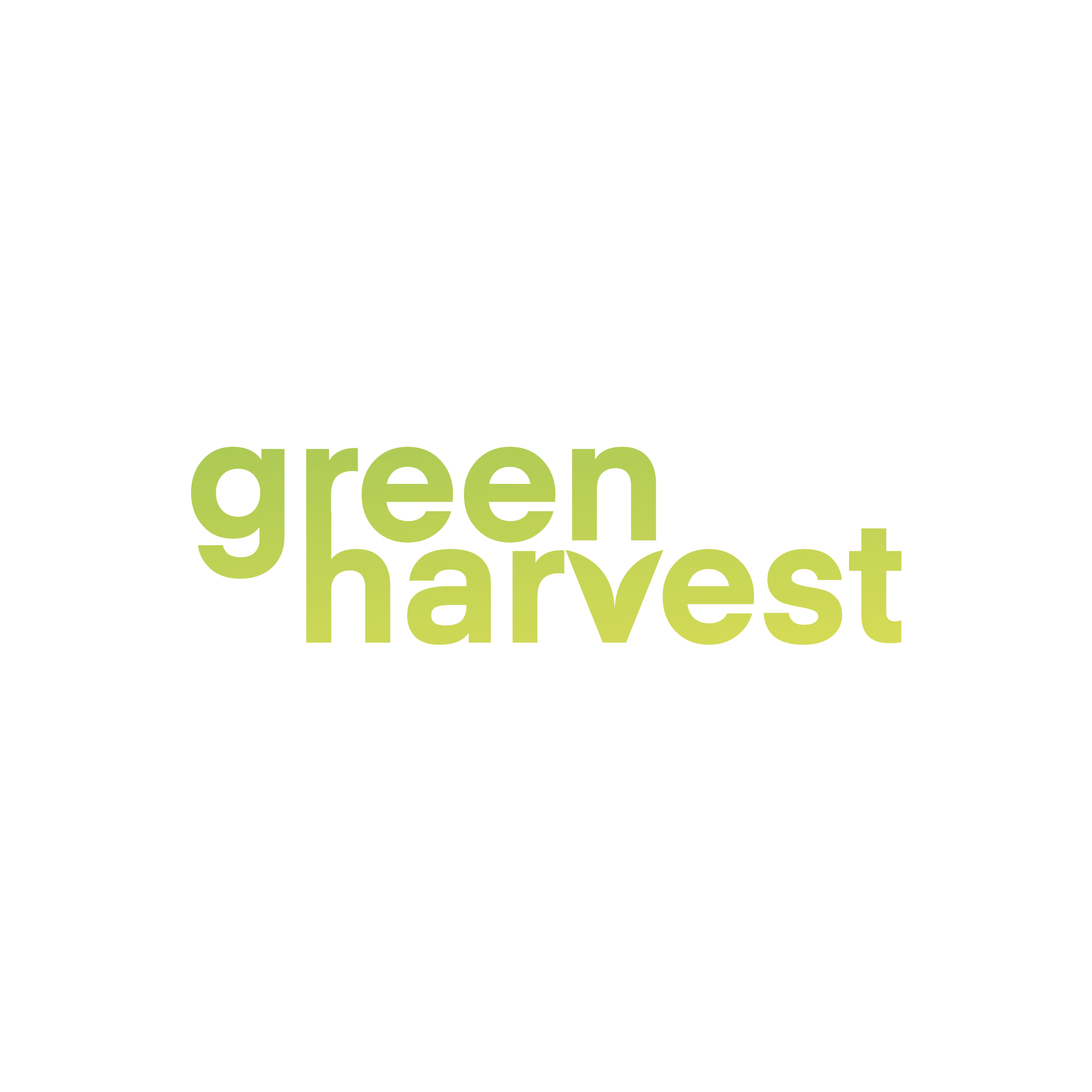
<style>
.page{position:relative;width:1092px;height:1092px;background:#ffffff}
.page>*{position:absolute;margin:0}
.t1{font:174.5px "Eina04-Bold";color:#b7ce55}
.t2{font:174.5px "Eina04-Bold";color:#c9d656}
</style>
<div class="page">
<p class="t1" style="left:191px;top:447px;width:465px;height:132px">green</p>
<p class="t2" style="left:306px;top:512px;width:595px;height:133px">har  est</p>
</div>
